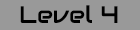
<style>
.page{position:relative;width:140px;height:30px;background:#999999}
.page>*{position:absolute;margin:0}
.t1{font:23.8px "Audiowide-Regular";color:#000000}
</style>
<div class="page">
<p class="t1" style="left:20px;top:5px;width:98px;height:18px">Level 4</p>
</div>
